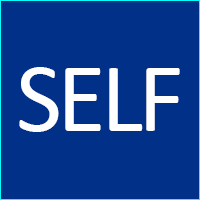
<style>
.page{position:relative;width:200px;height:200px;background:#003087}
.page>*{position:absolute;margin:0}
.t1{font:100px "Calibri";letter-spacing:-0.05em;color:#ffffff;text-transform:uppercase}
</style>
<div class="page">
<p class="t1" style="left:19px;top:67px;width:161px;height:65px">SELF</p>
</div>
